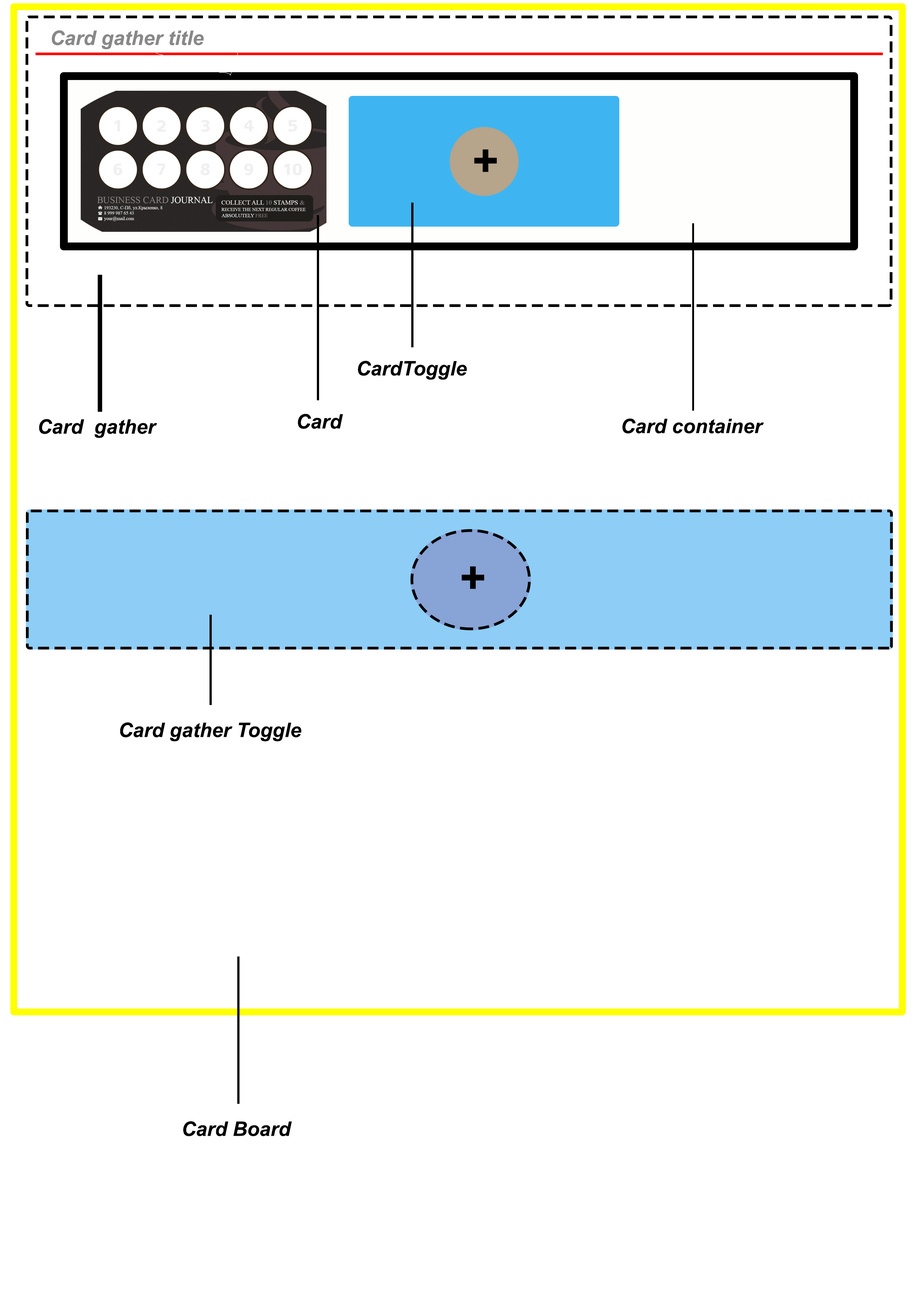
<style>
.page{position:relative;width:918px;height:1299px;background:#ffffff}
.page>*{position:absolute;margin:0}
.t1{font:20.1px "Arial-BoldItalicMT";color:#888888}
.t2{font:44.7px "Arial-BoldItalicMT";color:#000000}
.t3{font:20.1px "Arial-BoldItalicMT";color:#000000}
</style>
<div class="page">
<p class="t1" style="left:52px;top:30px;width:152px;height:19px">Card gather title</p>
<p class="t2" style="left:474px;top:149px;width:23px;height:23px">+</p>
<p class="t3" style="left:358px;top:361px;width:109px;height:19px">CardToggle</p>
<p class="t3" style="left:298px;top:414px;width:45px;height:15px">Card</p>
<p class="t3" style="left:39px;top:419px;width:118px;height:19px">Card  gather</p>
<p class="t3" style="left:622px;top:418px;width:142px;height:16px">Card container</p>
<p class="t2" style="left:462px;top:566px;width:22px;height:23px">+</p>
<p class="t3" style="left:120px;top:722px;width:181px;height:19px">Card gather Toggle</p>
<p class="t3" style="left:183px;top:1121px;width:109px;height:15px">Card Board</p>
</div>
